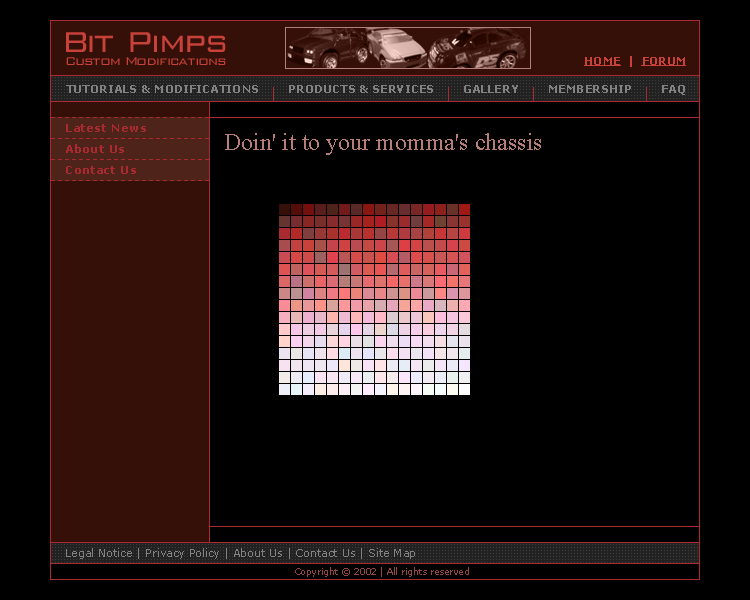
<style>
.page{position:relative;width:750px;height:600px;background:#000000}
.page>*{position:absolute;margin:0}
.t1{font:30px "WallStreet";letter-spacing:0.05em;color:#c8423a}
.t2{font:12px "WallStreet";letter-spacing:0.05em;color:#c8423a}
.t3{font:11px "Verdana-Bold";color:#c8423a;text-decoration:underline}
.t4{font:11px "Verdana-Bold";color:#c8423a}
.t5{font:11px "Verdana-Bold";color:#838281}
.t6{font:11px "Verdana-Bold";letter-spacing:0.05em;color:#a92a30}
.t7{font:24px "TimesNewRomanPSMT";color:#b77d78}
.t8{font:11px "Verdana";color:#838281}
.t9{font:9px "Verdana";color:#954644}
</style>
<div class="page">
<p class="t1" style="left:66px;top:32px;width:160px;height:20px">Bit Pimps</p>
<p class="t2" style="left:66px;top:57px;width:160px;height:8px">Custom Modifications</p>
<p class="t3" style="left:584px;top:56px;width:102px;height:11px">HOME<span class="t4">  |  </span>FORUM</p>
<p class="t5" style="left:66px;top:85px;width:192px;height:8px">TUTORIALS &amp; MODIFICATIONS</p>
<p class="t5" style="left:289px;top:85px;width:144px;height:8px">PRODUCTS &amp; SERVICES</p>
<p class="t5" style="left:464px;top:85px;width:54px;height:8px">GALLERY</p>
<p class="t5" style="left:549px;top:85px;width:82px;height:8px">MEMBERSHIP</p>
<p class="t5" style="left:662px;top:85px;width:23px;height:10px">FAQ</p>
<p class="t6" style="left:66px;top:124px;width:80px;height:8px">Latest News</p>
<p class="t7" style="left:225px;top:133px;width:316px;height:22px">Doin' it to your momma's chassis</p>
<p class="t6" style="left:66px;top:144px;width:58px;height:9px">About Us</p>
<p class="t6" style="left:66px;top:166px;width:70px;height:8px">Contact Us</p>
<p class="t8" style="left:66px;top:548px;width:349px;height:11px">Legal Notice | Privacy Policy | About Us | Contact Us | Site Map</p>
<p class="t9" style="left:295px;top:567px;width:174px;height:10px">Copyright © 2002 | All rights reserved</p>
</div>
